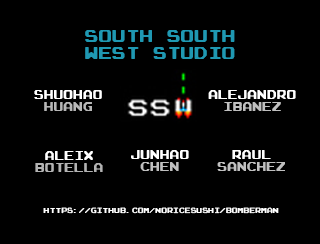
<style>
.page{position:relative;width:320px;height:244px;background:#000000}
.page>*{position:absolute;margin:0}
.t1{font:14px "ArcadeRounded";color:#1f98b2}
.t2{font:10px "ArcadeRounded";color:#ffffff}
.t3{font:10px "ArcadeRounded";color:#b7b7b7}
.t4{font:10px "ArcadeRounded";color:#c0c0c0}
.t5{font:10px "ArcadeRounded";color:#b3b3b3}
.t6{font:6px "ArcadeRounded";color:#ffffff}
</style>
<div class="page">
<p class="t1" style="left:85px;top:30px;width:150px;height:29px;text-align:center">South South<br>West Studio</p>
<p class="t2" style="left:34px;top:90px;width:68px;height:21px;text-align:center">Shuohao<br><span class="t3">Huang</span></p>
<p class="t2" style="left:208px;top:90px;width:88px;height:21px;text-align:center">Alejandro<br><span class="t4">Ibanez</span></p>
<p class="t2" style="left:131px;top:150px;width:58px;height:21px;text-align:center">Junhao<br><span class="t4">Chen</span></p>
<p class="t4" style="left:217px;top:150px;width:68px;height:21px;text-align:center"><span class="t2">Raul<br></span>Sanchez</p>
<p class="t5" style="left:35px;top:151px;width:68px;height:21px;text-align:center"><span class="t2">Aleix<br></span>Botella</p>
<p class="t6" style="left:43px;top:207px;width:236px;height:7px">https://github.com/NoRiceSushi/Bomberman</p>
</div>
